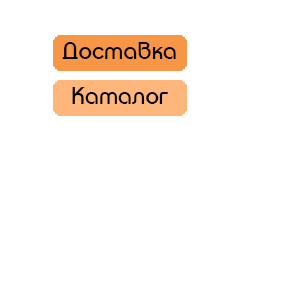
<style>
.page{position:relative;width:300px;height:300px;background:#ffffff}
.page>*{position:absolute;margin:0}
.t1{font:24px "TaurusNormal";color:#030303}
</style>
<div class="page">
<p class="t1" style="left:62px;top:42px;width:114px;height:17px">Доставка</p>
<p class="t1" style="left:72px;top:87px;width:96px;height:17px">Каталог</p>
</div>
